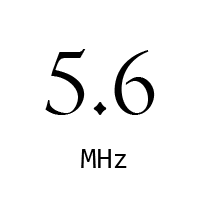
<style>
.page{position:relative;width:200px;height:200px;background:#ffffff}
.page>*{position:absolute;margin:0}
.t1{font:100px "Centaur";color:#000000}
.t2{font:29.2px "Consolas";color:#000000}
</style>
<div class="page">
<p class="t1" style="left:45px;top:49px;width:110px;height:66px">5.6</p>
<p class="t2" style="left:81px;top:149px;width:46px;height:19px">MHz</p>
</div>
